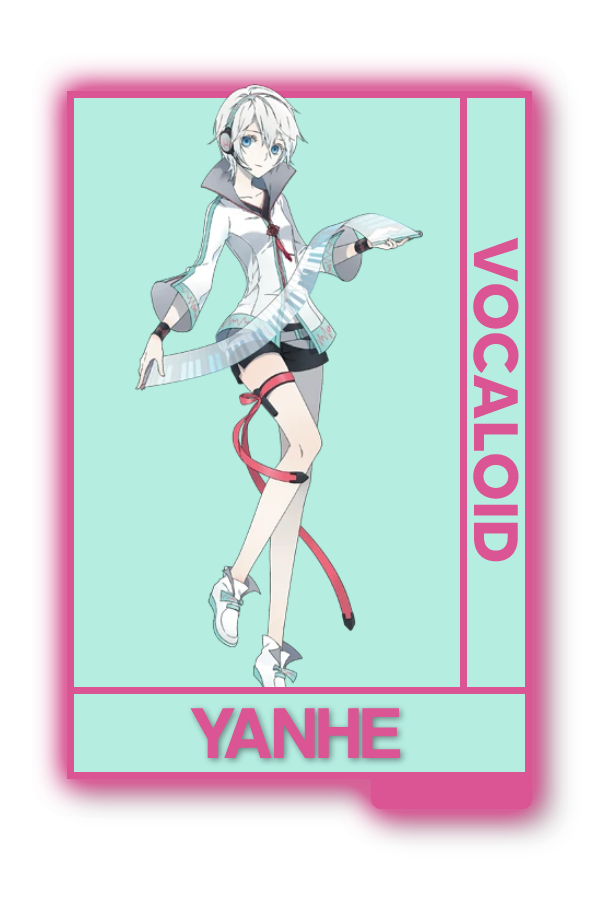
<style>
.page{position:relative;width:600px;height:900px;background:#b5ede1}
.page>*{position:absolute;margin:0}
.t1{font:62.5px "MADETOMMY-Bold";color:#db5493}
.t2{font:75px "CoolveticaRg-Regular";color:#db5493}
</style>
<div class="page">
<p class="t1" style="left:473px;top:237px;width:46px;height:325px;rotate:90deg">VOCALOID</p>
<p class="t2" style="left:190px;top:708px;width:211px;height:50px">YANHE</p>
</div>
